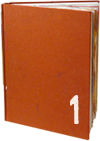
<style>
.page{position:relative;width:100px;height:141px}
.page>*{position:absolute;margin:0}
.t1{font:35.4px "StamPete";color:#e9e2e0}
</style>
<div class="page">
<p class="t1" style="left:70px;top:95px;width:9px;height:30px">1</p>
</div>
